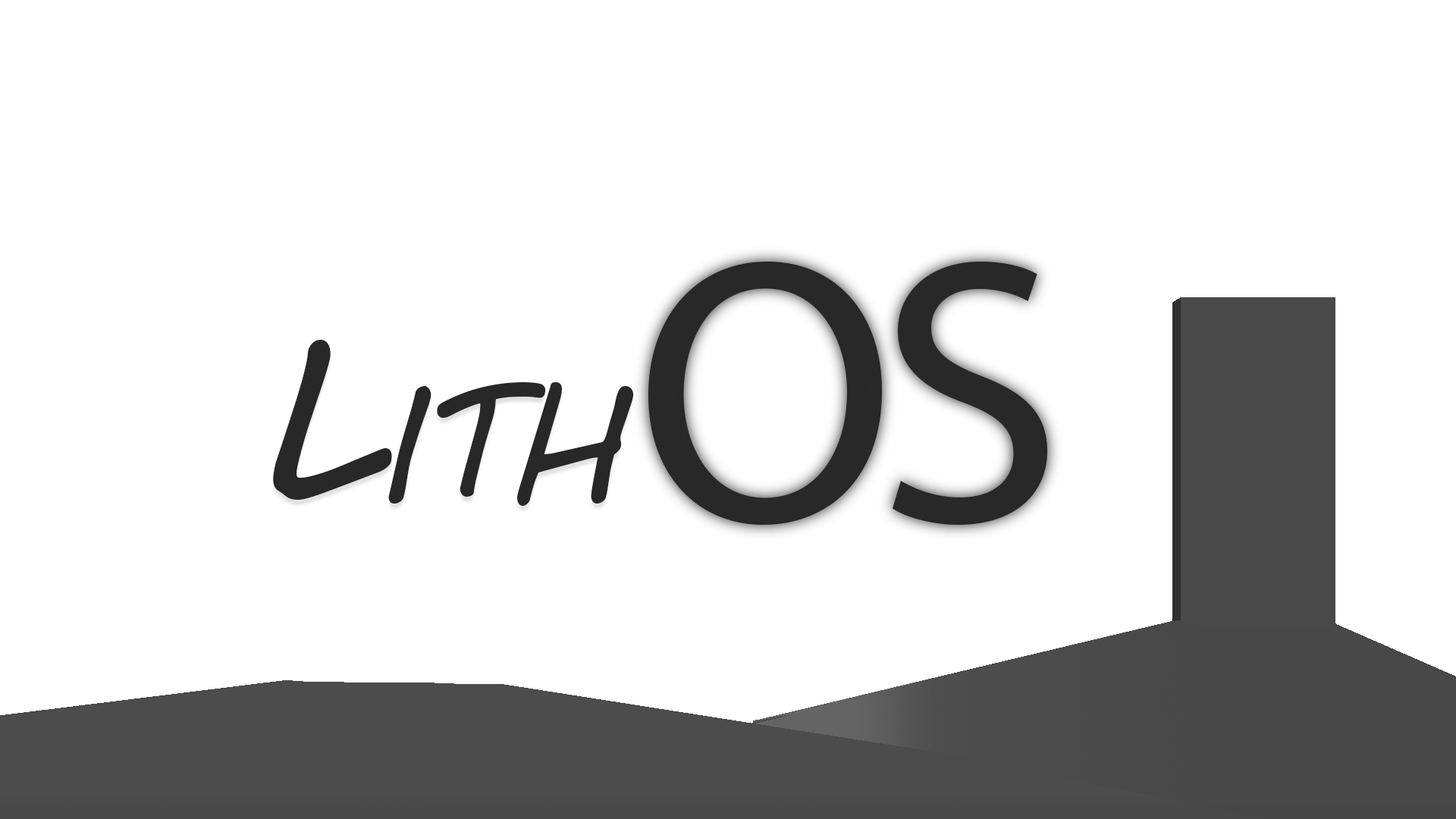
<style>
.page{position:relative;width:1456px;height:819px;background:#ffffff}
.page>*{position:absolute;margin:0}
.t1{font:227.5px "MVBoli";letter-spacing:-0.05em;color:#282828;font-variant:small-caps}
</style>
<div class="page">
<p class="t1" style="left:273px;top:340px;width:361px;height:166px">Lith</p>
</div>
